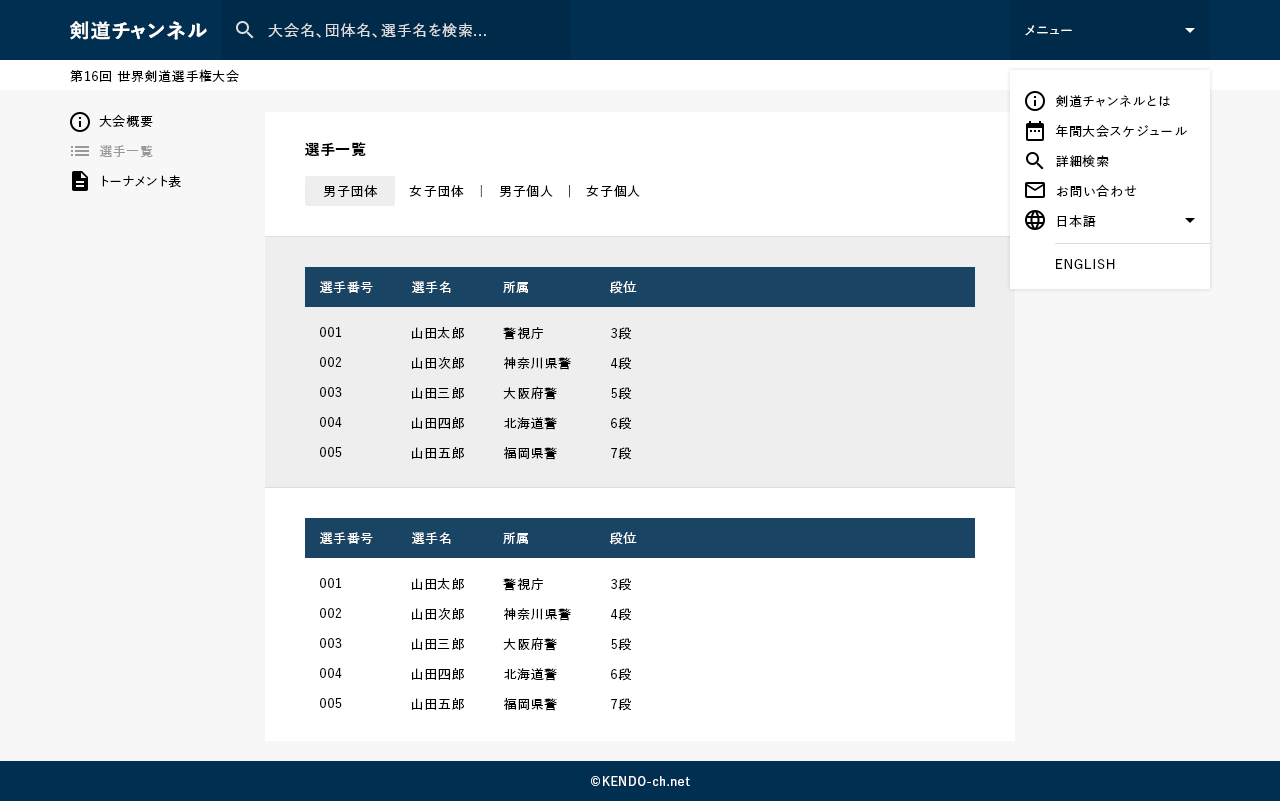
<style>
.page{position:relative;width:1280px;height:801px;background:#f7f7f7}
.page>*{position:absolute;margin:0}
.t1{font:20px "YuGo-Bold";letter-spacing:0.05em;color:#ffffff}
.t2{font:15px "YuGo-Medium";letter-spacing:0.05em;color:#dddddd}
.t3{font:13px "YuGo-Medium";letter-spacing:0.05em;color:#ffffff}
.t4{font:13px "YuGo-Medium";letter-spacing:0.05em;color:#000000}
.t5{font:13px/30px "YuGo-Medium";letter-spacing:0.05em;color:#000000}
.t6{font:13px/30px "YuGo-Medium";letter-spacing:0.05em;color:#999999}
.t7{font:15px "YuGo-Bold";letter-spacing:0.05em;color:#000000}
.t8{font:12px "YuGo-Medium";letter-spacing:0.05em;color:#ffffff}
</style>
<div class="page">
<p class="t1" style="left:70px;top:21px;width:137px;height:19px">剣道チャンネル</p>
<p class="t2" style="left:268px;top:23px;width:218px;height:15px">大会名、団体名、選手名を検索...</p>
<p class="t3" style="left:1025px;top:25px;width:47px;height:11px">メニュー</p>
<p class="t4" style="left:70px;top:69px;width:169px;height:13px">第16回 世界剣道選手権大会</p>
<p class="t5" style="left:1055px;top:95px;width:132px;height:132px">剣道チャンネルとは<br>年間大会スケジュール<br>詳細検索<br>お問い合わせ<br>日本語</p>
<p class="t5" style="left:99px;top:114px;width:82px;height:74px">大会概要<br><span class="t6">選手一覧<br></span>トーナメント表</p>
<p class="t7" style="left:305px;top:142px;width:61px;height:15px">選手一覧</p>
<p class="t4" style="left:323px;top:185px;width:317px;height:13px">男子団体　　 女子団体　｜　男子個人　|　女子個人</p>
<p class="t4" style="left:1056px;top:259px;width:59px;height:10px">ENGLISH</p>
<p class="t3" style="left:320px;top:281px;width:53px;height:12px">選手番号</p>
<p class="t3" style="left:412px;top:281px;width:39px;height:12px">選手名</p>
<p class="t3" style="left:503px;top:281px;width:25px;height:12px">所属</p>
<p class="t3" style="left:609px;top:281px;width:28px;height:13px">段位</p>
<p class="t5" style="left:320px;top:327px;width:22px;height:130px">001<br>002<br>003<br>004<br>005</p>
<p class="t5" style="left:412px;top:327px;width:52px;height:132px">山田太郎<br>山田次郎<br>山田三郎<br>山田四郎<br>山田五郎</p>
<p class="t5" style="left:503px;top:327px;width:68px;height:133px">警視庁<br>神奈川県警<br>大阪府警<br>北海道警<br>福岡県警</p>
<p class="t5" style="left:611px;top:327px;width:21px;height:133px">3段<br>4段<br>5段<br>6段<br>7段</p>
<p class="t3" style="left:320px;top:532px;width:53px;height:12px">選手番号</p>
<p class="t3" style="left:412px;top:532px;width:39px;height:12px">選手名</p>
<p class="t3" style="left:503px;top:532px;width:25px;height:12px">所属</p>
<p class="t3" style="left:609px;top:532px;width:28px;height:13px">段位</p>
<p class="t5" style="left:320px;top:578px;width:22px;height:130px">001<br>002<br>003<br>004<br>005</p>
<p class="t5" style="left:412px;top:578px;width:52px;height:132px">山田太郎<br>山田次郎<br>山田三郎<br>山田四郎<br>山田五郎</p>
<p class="t5" style="left:503px;top:578px;width:68px;height:133px">警視庁<br>神奈川県警<br>大阪府警<br>北海道警<br>福岡県警</p>
<p class="t5" style="left:611px;top:578px;width:21px;height:133px">3段<br>4段<br>5段<br>6段<br>7段</p>
<p class="t8" style="left:591px;top:776px;width:99px;height:10px">©KENDO-ch.net</p>
</div>
